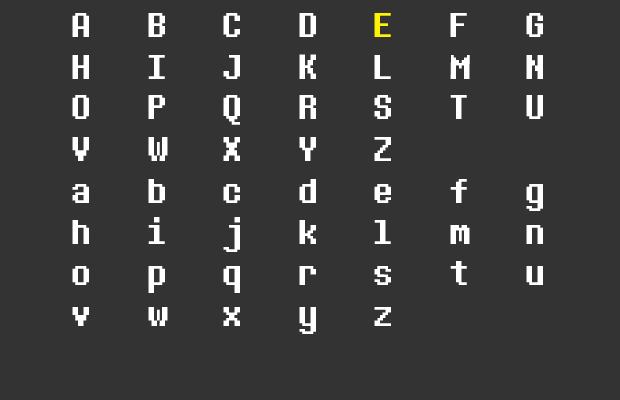
<style>
.page{position:relative;width:620px;height:400px;background:#333333}
.page>*{position:absolute;margin:0}
.t1{font:36px "DeterminationMono";letter-spacing:0.45em;color:#ffffff}
.t2{font:36px "DeterminationMono";letter-spacing:0.45em;color:#fff202}
</style>
<div class="page">
<p class="t1" style="left:72px;top:13px;width:471px;height:24px">A B C D <span class="t2">E</span> F G</p>
<p class="t1" style="left:72px;top:54px;width:471px;height:25px">H I J K L M N</p>
<p class="t1" style="left:72px;top:95px;width:471px;height:30px">O P Q R S T U</p>
<p class="t1" style="left:72px;top:137px;width:319px;height:24px">V W X Y Z</p>
<p class="t1" style="left:72px;top:179px;width:471px;height:32px">a b c d e f g</p>
<p class="t1" style="left:72px;top:217px;width:471px;height:35px">h i j k l m n</p>
<p class="t1" style="left:72px;top:261px;width:471px;height:32px">o p q r s t u</p>
<p class="t1" style="left:72px;top:307px;width:319px;height:27px">v w x y z</p>
</div>
